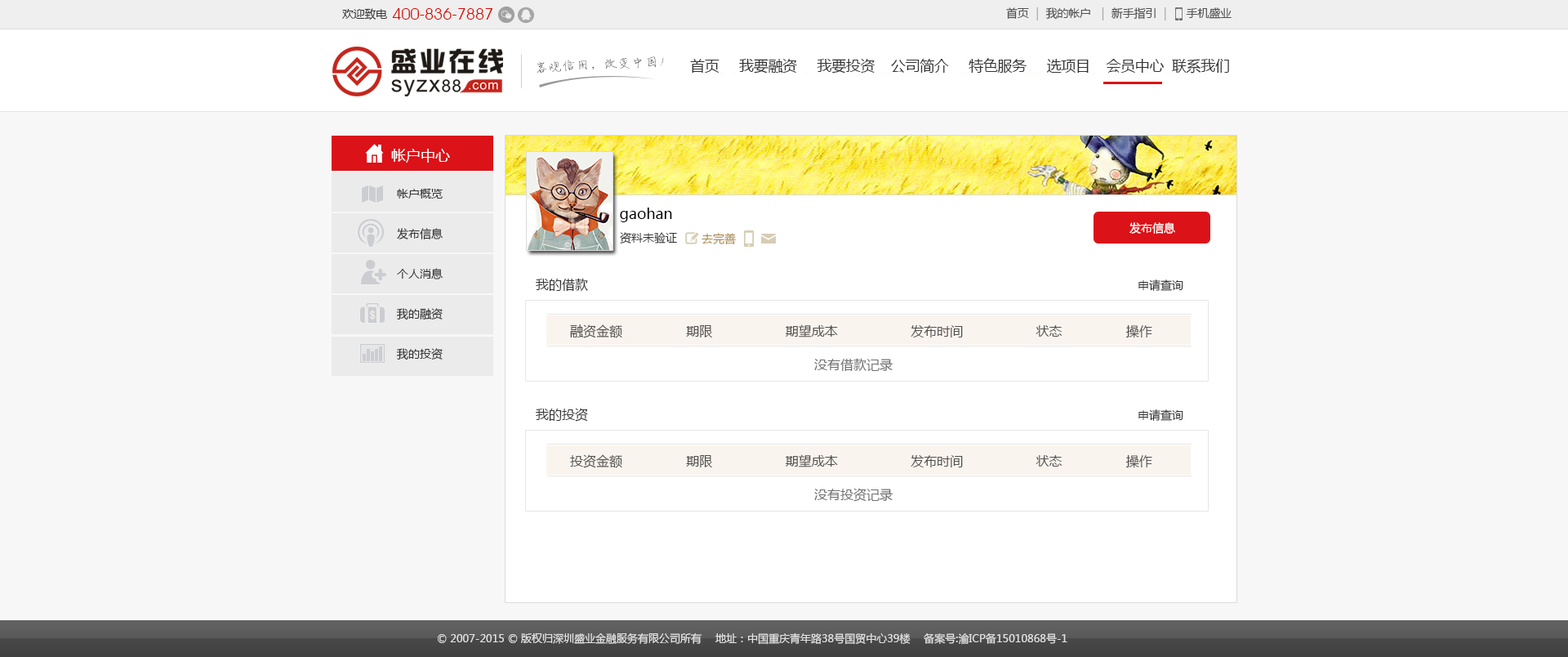
<style>
.page{position:relative;width:1568px;height:657px;background:#f7f7f7}
.page>*{position:absolute;margin:0}
.t1{font:11.4px "MicrosoftYaHei";letter-spacing:-0.02em;color:#333333}
.t2{font:16.5px "AvantGardeITCbyBT-Book";letter-spacing:-0.02em;color:#d60c00}
.t3{font:11.4px "MicrosoftYaHei";letter-spacing:-0.02em;color:#505050}
.t4{font:14.7px "MicrosoftYaHei";color:#ffffff}
.t5{font:11.4px/40px "MicrosoftYaHei";color:#333333}
.t6{font:14.7px "MicrosoftYaHei";color:#000000}
.t7{font:11.4px "MicrosoftYaHei";color:#333333}
.t8{font:11.4px "MicrosoftYaHei";color:#ab8b4d}
.t9{font:11.4px "MicrosoftYaHei";color:#ffffff}
.t10{font:13.1px "MicrosoftYaHei";color:#333333}
.t11{font:13.1px "MicrosoftYaHei";color:#525150}
.t12{font:13.1px "MicrosoftYaHei";color:#6e6e6e}
.t13{font:10.6px "MicrosoftYaHei";color:#e3e3e3}
</style>
<div class="page">
<p class="t1" style="left:342px;top:8px;width:45px;height:12px">欢迎致电</p>
<p class="t2" style="left:392px;top:8px;width:100px;height:12px">400-836-7887</p>
<p class="t3" style="left:1006px;top:7px;width:226px;height:13px">首页 ｜ 我的帐户  ｜ 新手指引 ｜     手机盛业</p>
<p class="t4" style="left:391px;top:149px;width:59px;height:14px">帐户中心</p>
<p class="t5" style="left:396px;top:189px;width:47px;height:171px">帐户概览<br>发布信息<br>个人消息<br>我的融资<br>我的投资</p>
<p class="t6" style="left:620px;top:207px;width:52px;height:15px">gaohan</p>
<p class="t7" style="left:620px;top:232px;width:57px;height:11px">资料未验证</p>
<p class="t8" style="left:702px;top:233px;width:34px;height:11px">去完善</p>
<p class="t9" style="left:1129px;top:222px;width:46px;height:12px">发布信息</p>
<p class="t10" style="left:536px;top:278px;width:52px;height:13px">我的借款</p>
<p class="t7" style="left:1138px;top:279px;width:45px;height:12px">申请查询</p>
<p class="t11" style="left:570px;top:324px;width:582px;height:14px">融资金额　　　   　期限　　　  　　期望成本　　　  　　发布时间　　　　  　状态　　　   　操作</p>
<p class="t12" style="left:814px;top:358px;width:79px;height:13px">没有借款记录</p>
<p class="t10" style="left:536px;top:408px;width:52px;height:13px">我的投资</p>
<p class="t7" style="left:1138px;top:409px;width:45px;height:12px">申请查询</p>
<p class="t11" style="left:570px;top:454px;width:582px;height:14px">投资金额　　　   　期限　　　  　　期望成本　　　  　　发布时间　　　　  　状态　　　   　操作</p>
<p class="t12" style="left:814px;top:488px;width:79px;height:13px">没有投资记录</p>
<p class="t13" style="left:438px;top:632px;width:629px;height:12px">© 2007-2015 © 版权归深圳盛业金融服务有限公司所有　 地址：中国重庆青年路38号国贸中心39楼 　备案号:渝ICP备15010868号-1</p>
</div>
